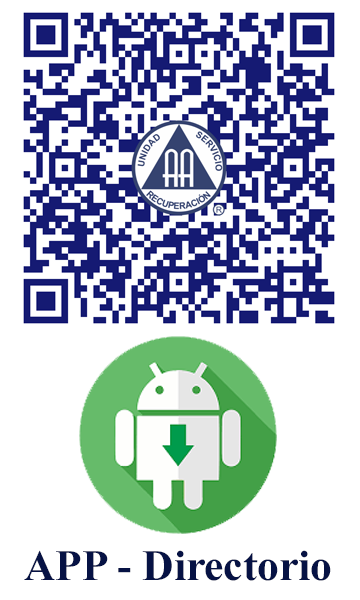
<style>
.page{position:relative;width:360px;height:600px;background:#ffffff}
.page>*{position:absolute;margin:0}
.t1{font:43.4px "TimesNewRomanPS-BoldMT";color:#061244}
</style>
<div class="page">
<p class="t1" style="left:24px;top:550px;width:307px;height:31px">APP - Directorio</p>
</div>
